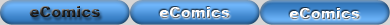
<style>
.page{position:relative;width:390px;height:25px}
.page>*{position:absolute;margin:0}
.t1{font:15px "Arial-Black";color:#252525}
.t2{font:15px "Arial-Black";color:#ffffff}
</style>
<div class="page">
<p class="t1" style="left:29px;top:6px;width:71px;height:11px">eComics</p>
<p class="t2" style="left:159px;top:7px;width:71px;height:11px">eComics</p>
<p class="t2" style="left:289px;top:8px;width:71px;height:11px">eComics</p>
</div>
